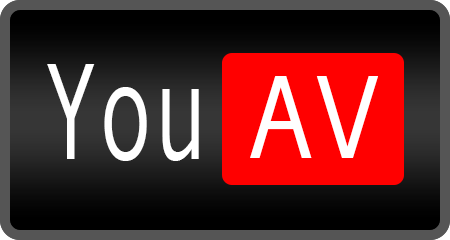
<style>
.page{position:relative;width:450px;height:240px}
.page>*{position:absolute;margin:0}
.t1{font:138.4px "AndaleMono";color:#ffffff;scale:0.66 1}
.t2{font:118.7px "AndaleMono";color:#ffffff;scale:0.94 1}
</style>
<div class="page">
<p class="t1" style="left:47px;top:64px;width:152px;height:97px">You</p>
<p class="t2" style="left:250px;top:76px;width:129px;height:82px">AV</p>
</div>
